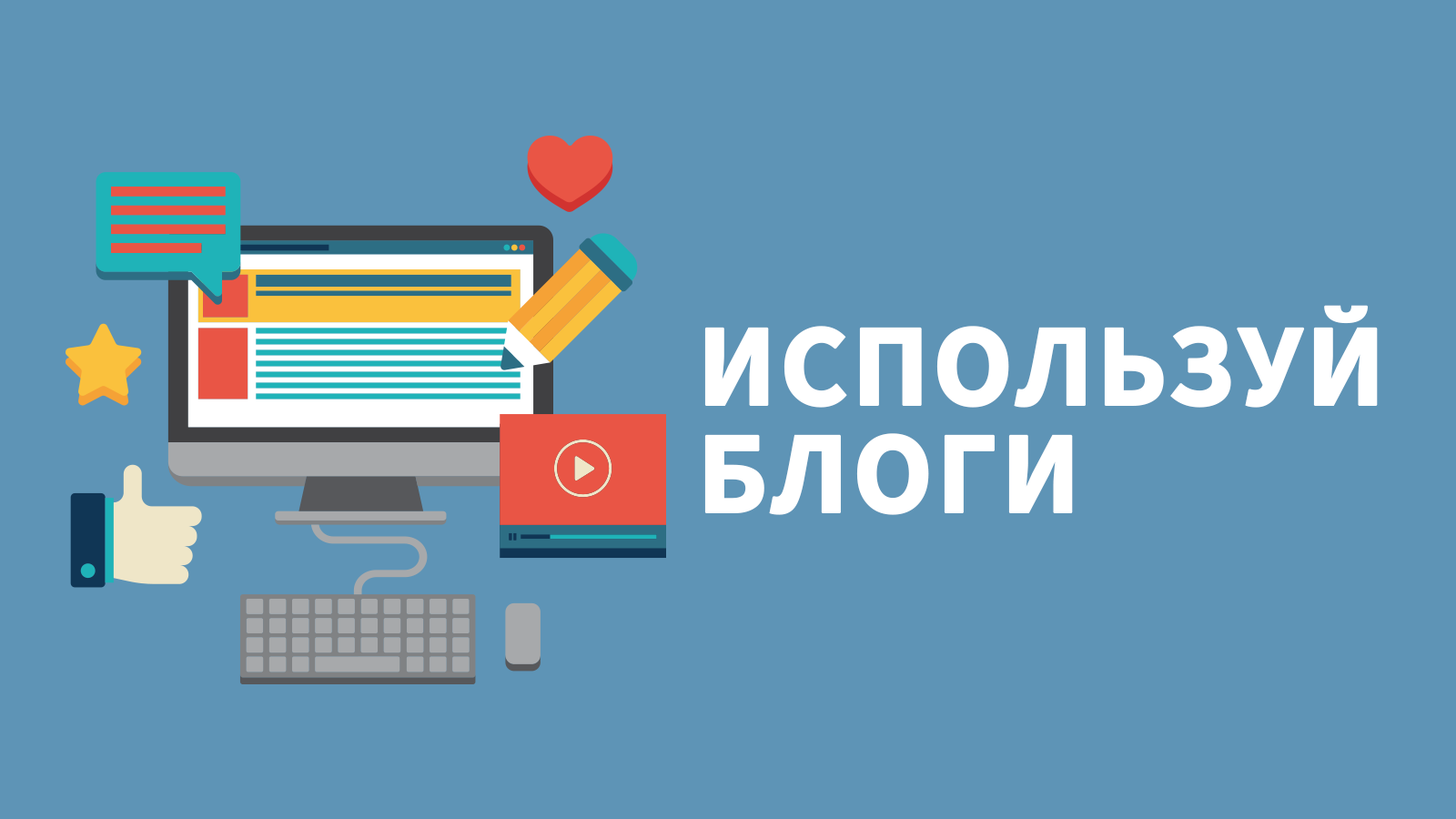
<style>
.page{position:relative;width:1456px;height:819px;background:#5e94b6}
.page>*{position:absolute;margin:0}
.t1{font:117.8px/91px "SourceSansPro-Bold";color:#ffffff;text-transform:uppercase;font-weight:bold}
</style>
<div class="page">
<p class="t1" style="left:704px;top:305px;width:674px;height:210px">используй <br>Блоги</p>
</div>
